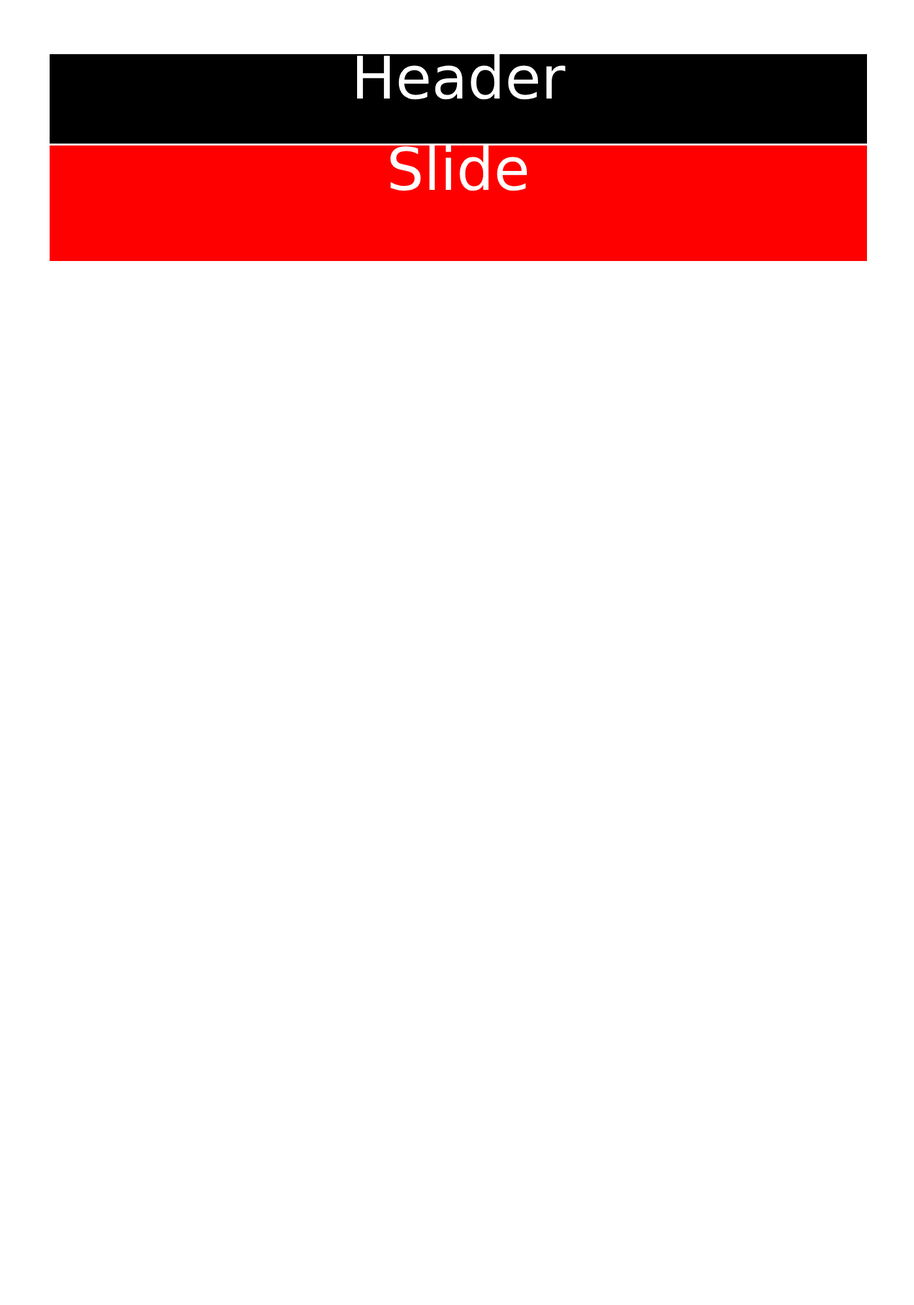
<style>
.page{position:relative;width:914px;height:1305px;background:#ffffff}
.page>*{position:absolute;margin:0}
.t1{font:58.7px "DejaVuSans";color:#ffffff}
</style>
<div class="page">
<p class="t1" style="left:356px;top:54px;width:209px;height:46px">Header</p>
<p class="t1" style="left:390px;top:145px;width:137px;height:46px">Slide</p>
</div>
